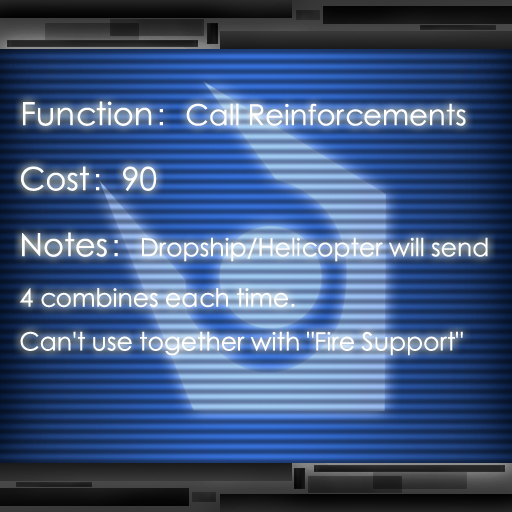
<style>
.page{position:relative;width:512px;height:512px}
.page>*{position:absolute;margin:0}
.t1{font:29px "STXihei";color:#ffffff}
.t2{font:32px "STXihei";color:#ffffff}
.t3{font:25px "STXihei";color:#ffffff}
</style>
<div class="page">
<p class="t1" style="left:23px;top:101px;width:443px;height:25px"><span class="t2">Function：</span>Call Reinforcements</p>
<p class="t2" style="left:21px;top:166px;width:136px;height:25px">Cost：90</p>
<p class="t3" style="left:19px;top:232px;width:469px;height:124px"><span class="t2">Notes：</span>Dropship/Helicopter will send<br>4 combines each time.<br>Can't use together with "Fire Support"</p>
</div>
